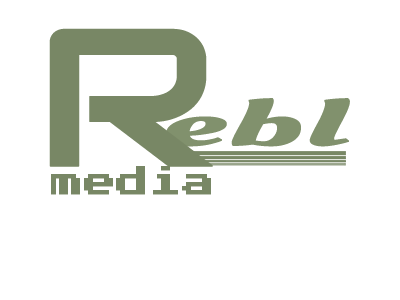
<style>
.page{position:relative;width:400px;height:300px;background:#ffffff}
.page>*{position:absolute;margin:0}
.t1{font:194.8px "Audiowide-Regular";color:#788765;font-weight:bold;scale:1.14 1}
.t2{font:63.2px "OleoScript-Regular";color:#81916d;font-weight:bold;scale:2.47 1}
.t3{font:32px "PressStart2P-Regular";color:#788765;font-weight:bold}
</style>
<div class="page">
<p class="t1" style="left:49px;top:28px;width:164px;height:139px">R</p>
<p class="t2" style="left:166px;top:98px;width:184px;height:49px">ebl</p>
<p class="t3" style="left:51px;top:166px;width:160px;height:29px">media</p>
</div>
